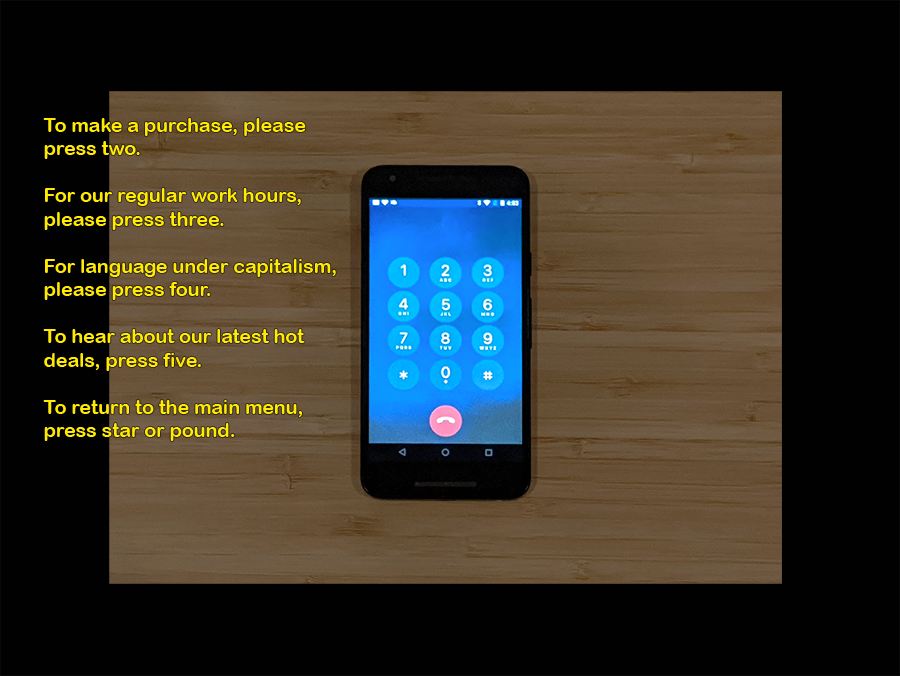
<style>
.page{position:relative;width:900px;height:676px;background:#010101}
.page>*{position:absolute;margin:0}
.t1{font:19.6px "ArialRoundedMTBold";color:#ffea03}
</style>
<div class="page">
<p class="t1" style="left:43px;top:118px;width:263px;height:41px">To make a purchase, please press two.</p>
<p class="t1" style="left:44px;top:188px;width:257px;height:42px">For our regular work hours, please press three.</p>
<p class="t1" style="left:44px;top:259px;width:292px;height:41px">For language under capitalism, please press four.</p>
<p class="t1" style="left:43px;top:329px;width:262px;height:42px">To hear about our latest hot deals, press five.</p>
<p class="t1" style="left:43px;top:400px;width:259px;height:41px">To return to the main menu, press star or pound.</p>
</div>
